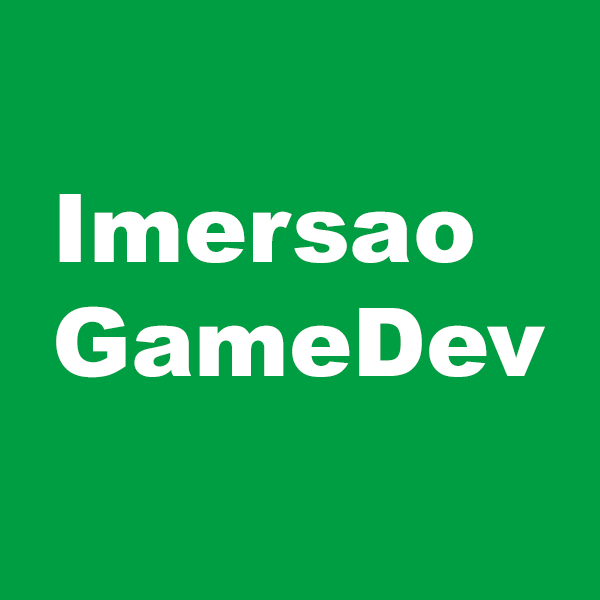
<style>
.page{position:relative;width:600px;height:600px;background:#009e43}
.page>*{position:absolute;margin:0}
.t1{font:95px "Arial-Black";color:#ffffff}
</style>
<div class="page">
<p class="t1" style="left:56px;top:194px;width:489px;height:184px">Imersao<br>GameDev</p>
</div>
